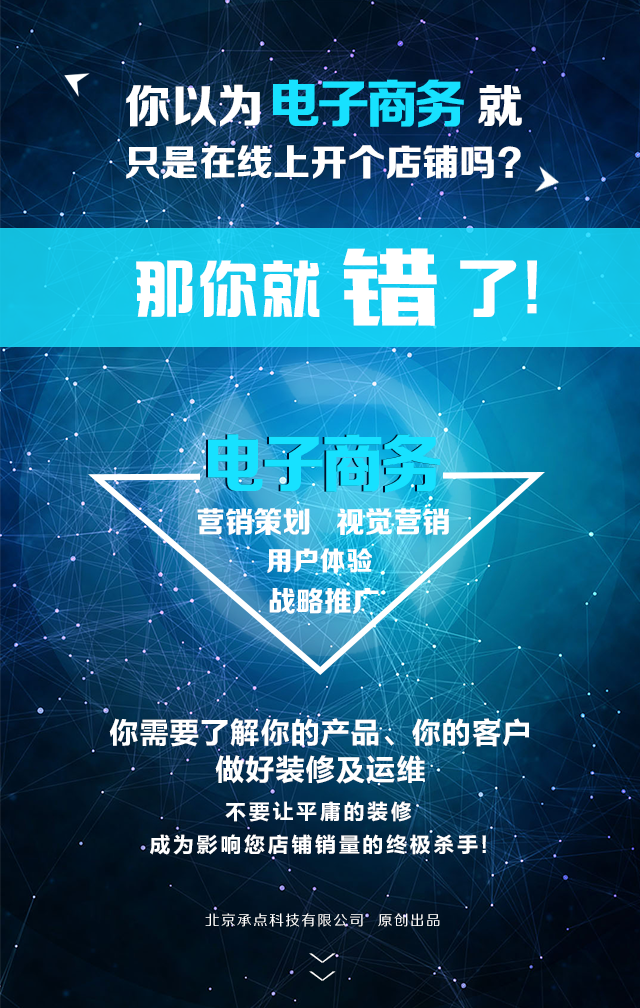
<style>
.page{position:relative;width:640px;height:1008px}
.page>*{position:absolute;margin:0}
.t1{font:46px "FZZDHJW--GB1-0";letter-spacing:0.005em;color:#ffffff;text-transform:uppercase}
.t2{font:52.7px "FZZDHJW--GB1-0";letter-spacing:-0.075em;color:#17e1ff;text-transform:uppercase}
.t3{font:36.8px "FZZDHJW--GB1-0";color:#ffffff;text-transform:uppercase}
.t4{font:103.4px "MFBanHei_Noncommercial-Regular";color:#ffffff;text-transform:uppercase;scale:0.91 1}
.t5{font:61.1px "¹ã½Ý¾ÓÃÔÄã×Ö¿â";letter-spacing:0.05em;color:#ffffff;text-transform:uppercase}
.t6{font:65.1px "FZLTCHK--GBK1-0";color:#ffffff;text-transform:uppercase}
.t7{font:64.4px "FZZDHJW--GB1-0";letter-spacing:-0.075em;color:#17e1ff;text-transform:uppercase}
.t8{font:29.3px "FZZDHJW--GB1-0";letter-spacing:0.005em;color:#ffffff;text-transform:uppercase}
.t9{font:26.8px "FZZDHJW--GB1-0";letter-spacing:0.005em;color:#ffffff;text-transform:uppercase}
.t10{font:28.4px "FZZDHJW--GB1-0";letter-spacing:0.005em;color:#ffffff;text-transform:uppercase}
.t11{font:30.2px/36.3px "FZLTCHK--GBK1-0";color:#ffffff;text-transform:uppercase}
.t12{font:21.5px/32.2px "FZLTCHK--GBK1-0";letter-spacing:0.1em;color:#ffffff;text-transform:uppercase}
.t13{font:14.2px "FZZHJW--GB1-0";letter-spacing:0.1em;color:#ffffff;text-transform:uppercase}
.t14{font:36.8px "FZZXHJW--GB1-0";letter-spacing:0.5em;color:#ffffff;text-transform:uppercase;scale:0.44 1}
</style>
<div class="page">
<p class="t1" style="left:126px;top:84px;width:396px;height:43px">你以为                就</p>
<p class="t2" style="left:273px;top:79px;width:191px;height:49px">电子商务</p>
<p class="t3" style="left:126px;top:145px;width:395px;height:34px">只是在线上开个店铺吗？</p>
<p class="t4" style="left:343px;top:248px;width:94px;height:78px">错</p>
<p class="t5" style="left:136px;top:260px;width:381px;height:57px">那你就    了</p>
<p class="t6" style="left:527px;top:260px;width:10px;height:54px">!</p>
<p class="t7" style="left:206px;top:434px;width:233px;height:59px">电子商务</p>
<p class="t7" style="left:208px;top:434px;width:233px;height:59px">电子商务</p>
<p class="t8" style="left:197px;top:508px;width:252px;height:27px">营销策划   视觉营销</p>
<p class="t9" style="left:267px;top:548px;width:105px;height:25px">用户体验</p>
<p class="t10" style="left:269px;top:588px;width:110px;height:26px">战略推广</p>
<p class="t11" style="left:109px;top:718px;width:420px;height:66px;text-align:center">你需要了解你的产品、你的客户<br>做好装修及运维</p>
<p class="t12" style="left:150px;top:801px;width:336px;height:54px;text-align:center">不要让平庸的装修<br>成为影响您店铺销量的终极杀手!</p>
<p class="t13" style="left:205px;top:913px;width:235px;height:14px">北京承点科技有限公司  原创出品</p>
<p class="t14" style="left:309px;top:953px;width:27px;height:28px;rotate:90deg">&gt;&gt;</p>
</div>
